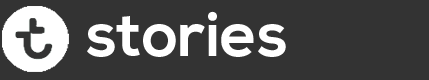
<style>
.page{position:relative;width:429px;height:80px;background:#333333}
.page>*{position:absolute;margin:0}
.t1{font:63.2px "NexaBold";color:#ffffff}
</style>
<div class="page">
<p class="t1" style="left:87px;top:11px;width:199px;height:46px">stories</p>
</div>
